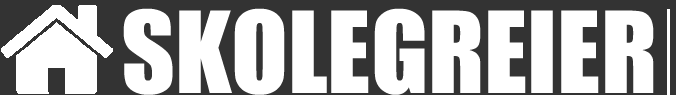
<style>
.page{position:relative;width:676px;height:95px;background:#ffffff}
.page>*{position:absolute;margin:0}
.t1{font:104.2px "Impact";color:#ffffff}
</style>
<div class="page">
<p class="t1" style="left:123px;top:8px;width:531px;height:87px">SKOLEGREIER</p>
</div>
